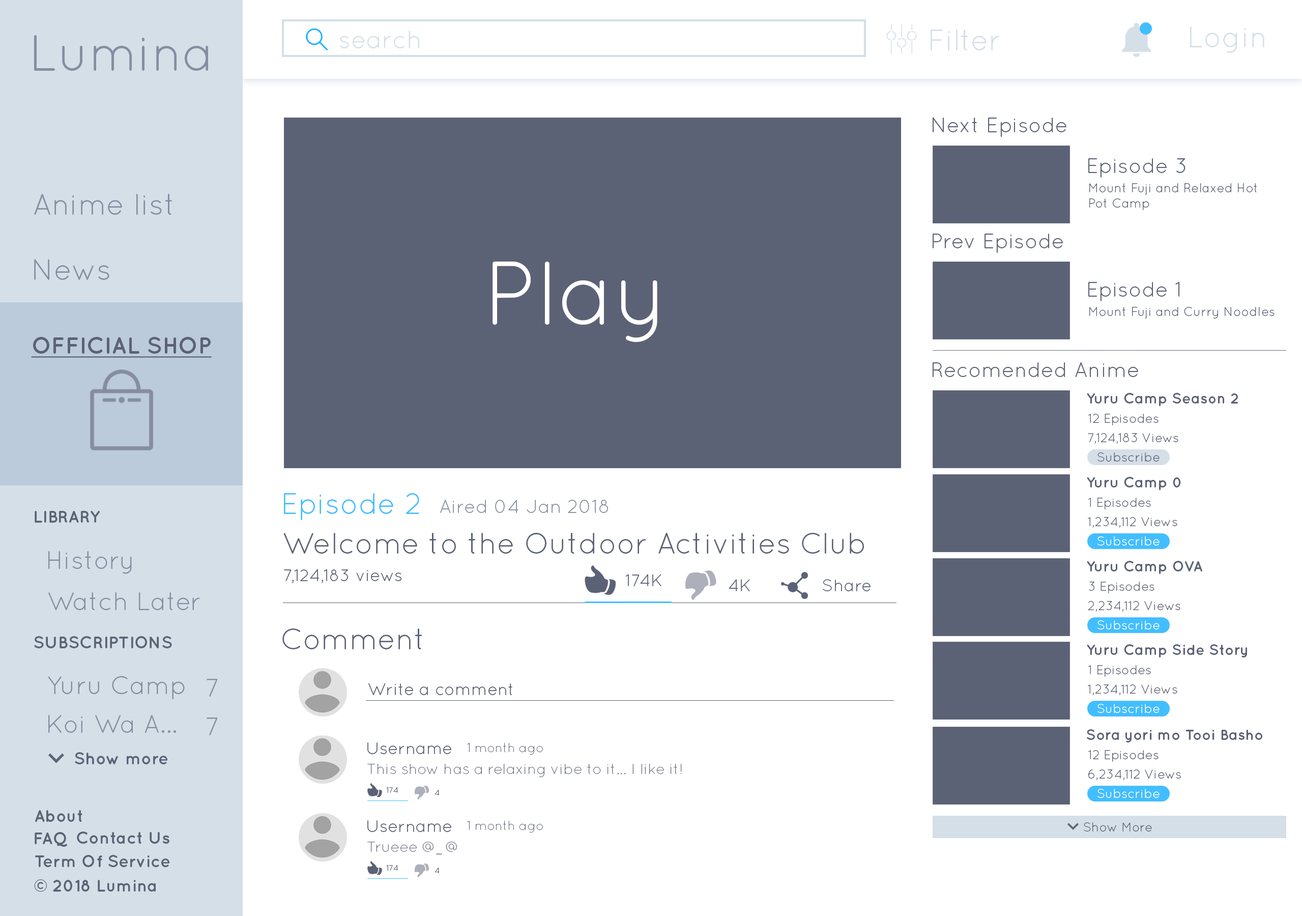
<style>
.page{position:relative;width:1302px;height:916px;background:#ffffff}
.page>*{position:absolute;margin:0}
.t1{font:29.7px "Quicksand-Regular";color:#d5dfe8}
.t2{font:50.9px "QuicksandBook-Regular";color:#878da0}
.t3{font:25.4px "QuicksandBook-Regular";color:#d5dfe8}
.t4{font:21.2px "Quicksand-Regular";color:#5c6275}
.t5{font:12.7px "Quicksand-Regular";color:#5c6275}
.t6{font:29.7px "Quicksand-Regular";color:#878da0}
.t7{font:29.7px "QuicksandBook-Regular";color:#878da0}
.t8{font:90px "Quicksand-Regular";color:#ffffff}
.t9{font:23.3px "QuicksandBold-Regular";color:#5c6275;text-decoration:underline}
.t10{font:14.8px "Quicksand-Bold";color:#5c6275}
.t11{font:29.7px "Quicksand-Regular";color:#42beff}
.t12{font:19.1px "Quicksand-Regular";color:#878da0}
.t13{font:17px "QuicksandBold-Regular";color:#5c6275}
.t14{font:29.7px "Quicksand-Regular";color:#5c6275}
.t15{font:12.7px "Quicksand-Regular";color:#ffffff}
.t16{font:25.4px "QuicksandBook-Regular";color:#878da0}
.t17{font:17px "Quicksand-Regular";color:#5c6275}
.t18{font:12.7px "Quicksand-Light";color:#5c6275}
.t19{font:17px "Quicksand-Bold";color:#5c6275}
.t20{font:14.8px "Quicksand-Light";color:#5c6275}
.t21{font:8px "Quicksand-Regular";color:#5c6275}
.t22{font:6.1px "Quicksand-Regular";color:#5c6275}
</style>
<div class="page">
<p class="t1" style="left:931px;top:30px;width:69px;height:20px">Filter</p>
<p class="t1" style="left:1190px;top:26px;width:74px;height:27px">Login</p>
<p class="t2" style="left:34px;top:35px;width:174px;height:36px">Lumina</p>
<p class="t3" style="left:339px;top:31px;width:80px;height:17px">search</p>
<p class="t4" style="left:933px;top:117px;width:133px;height:20px">Next Episode</p>
<p class="t4" style="left:1088px;top:158px;width:97px;height:20px">Episode 3</p>
<p class="t5" style="left:1089px;top:183px;width:168px;height:27px">Mount Fuji and Relaxed Hot <br>Pot Camp</p>
<p class="t6" style="left:34px;top:194px;width:138px;height:21px">Anime list</p>
<p class="t4" style="left:933px;top:234px;width:130px;height:19px">Prev Episode</p>
<p class="t7" style="left:34px;top:259px;width:75px;height:21px">News</p>
<p class="t8" style="left:493px;top:261px;width:164px;height:81px">Play</p>
<p class="t4" style="left:1088px;top:281px;width:92px;height:20px">Episode 1</p>
<p class="t5" style="left:1089px;top:307px;width:186px;height:12px">Mount Fuji and Curry Noodles</p>
<p class="t9" style="left:31px;top:337px;width:181px;height:21px">OFFICIAL SHOP</p>
<p class="t4" style="left:932px;top:362px;width:206px;height:15px">Recomended Anime</p>
<p class="t10" style="left:1087px;top:393px;width:151px;height:13px">Yuru Camp Season 2</p>
<p class="t5" style="left:1088px;top:414px;width:71px;height:11px">12 Episodes</p>
<p class="t5" style="left:1088px;top:433px;width:90px;height:11px">7,124,183 Views</p>
<p class="t5" style="left:1097px;top:452px;width:63px;height:9px">Subscribe</p>
<p class="t10" style="left:1087px;top:477px;width:94px;height:13px">Yuru Camp 0</p>
<p class="t11" style="left:284px;top:493px;width:135px;height:27px">Episode 2</p>
<p class="t5" style="left:1088px;top:498px;width:63px;height:11px">1 Episodes</p>
<p class="t12" style="left:440px;top:499px;width:168px;height:14px">Aired 04 Jan 2018</p>
<p class="t13" style="left:35px;top:511px;width:65px;height:12px">LIBRARY</p>
<p class="t5" style="left:1088px;top:517px;width:89px;height:11px">1,234,112 Views</p>
<p class="t14" style="left:283px;top:533px;width:581px;height:21px">Welcome to the Outdoor Activities Club</p>
<p class="t15" style="left:1097px;top:536px;width:63px;height:9px">Subscribe</p>
<p class="t16" style="left:48px;top:551px;width:84px;height:23px">History</p>
<p class="t17" style="left:284px;top:569px;width:118px;height:14px">7,124,183 views</p>
<p class="t10" style="left:1087px;top:561px;width:115px;height:13px">Yuru Camp OVA</p>
<p class="t17" style="left:625px;top:574px;width:36px;height:12px">174K</p>
<p class="t17" style="left:729px;top:579px;width:21px;height:12px">4K</p>
<p class="t17" style="left:823px;top:579px;width:48px;height:12px">Share</p>
<p class="t5" style="left:1089px;top:582px;width:65px;height:11px">3 Episodes</p>
<p class="t16" style="left:48px;top:592px;width:152px;height:18px">Watch Later</p>
<p class="t5" style="left:1088px;top:601px;width:92px;height:11px">2,234,112 Views</p>
<p class="t14" style="left:282px;top:628px;width:140px;height:21px">Comment</p>
<p class="t15" style="left:1097px;top:620px;width:63px;height:9px">Subscribe</p>
<p class="t13" style="left:34px;top:636px;width:138px;height:12px">SUBSCRIPTIONS</p>
<p class="t10" style="left:1087px;top:644px;width:160px;height:13px">Yuru Camp Side Story</p>
<p class="t5" style="left:1088px;top:665px;width:63px;height:12px">1 Episodes</p>
<p class="t16" style="left:48px;top:676px;width:137px;height:23px">Yuru Camp</p>
<p class="t16" style="left:207px;top:679px;width:11px;height:18px">7</p>
<p class="t17" style="left:368px;top:683px;width:144px;height:12px">Write a comment</p>
<p class="t5" style="left:1088px;top:684px;width:89px;height:11px">1,234,112 Views</p>
<p class="t15" style="left:1097px;top:704px;width:63px;height:9px">Subscribe</p>
<p class="t16" style="left:48px;top:715px;width:128px;height:18px">Koi Wa A...</p>
<p class="t16" style="left:207px;top:717px;width:11px;height:18px">7</p>
<p class="t10" style="left:1087px;top:729px;width:175px;height:13px">Sora yori mo Tooi Basho</p>
<p class="t17" style="left:367px;top:742px;width:84px;height:12px">Username</p>
<p class="t18" style="left:467px;top:743px;width:76px;height:12px">1 month ago</p>
<p class="t5" style="left:1088px;top:750px;width:71px;height:12px">12 Episodes</p>
<p class="t19" style="left:75px;top:752px;width:92px;height:12px">Show more</p>
<p class="t20" style="left:367px;top:764px;width:315px;height:13px">This show has a relaxing vibe to it... I like it!</p>
<p class="t5" style="left:1088px;top:769px;width:93px;height:11px">6,234,112 Views</p>
<p class="t21" style="left:386px;top:787px;width:12px;height:6px">174</p>
<p class="t21" style="left:435px;top:790px;width:5px;height:5px">4</p>
<p class="t15" style="left:1097px;top:789px;width:63px;height:9px">Subscribe</p>
<p class="t19" style="left:35px;top:810px;width:47px;height:12px">About</p>
<p class="t17" style="left:367px;top:820px;width:84px;height:12px">Username</p>
<p class="t18" style="left:467px;top:821px;width:76px;height:11px">1 month ago</p>
<p class="t19" style="left:35px;top:832px;width:32px;height:15px">FAQ</p>
<p class="t19" style="left:77px;top:831px;width:92px;height:13px">Contact Us</p>
<p class="t22" style="left:1084px;top:822px;width:68px;height:9px">Show More</p>
<p class="t20" style="left:367px;top:842px;width:90px;height:12px">Trueee @_@</p>
<p class="t19" style="left:35px;top:855px;width:134px;height:12px">Term Of Service</p>
<p class="t21" style="left:386px;top:864px;width:12px;height:7px">174</p>
<p class="t21" style="left:435px;top:868px;width:5px;height:5px">4</p>
<p class="t19" style="left:34px;top:879px;width:122px;height:13px">© 2018 Lumina</p>
</div>
